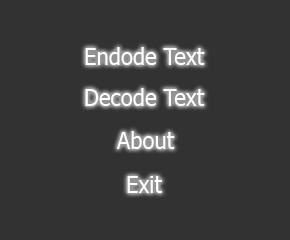
<style>
.page{position:relative;width:290px;height:240px;background:#323232}
.page>*{position:absolute;margin:0}
.t1{font:23px "Tahoma";color:#ffffff;scale:0.96 1}
</style>
<div class="page">
<p class="t1" style="left:85px;top:47px;width:120px;height:18px">Endode Text</p>
<p class="t1" style="left:85px;top:88px;width:120px;height:18px">Decode Text</p>
<p class="t1" style="left:117px;top:131px;width:58px;height:18px">About</p>
<p class="t1" style="left:127px;top:176px;width:35px;height:17px">Exit</p>
</div>
